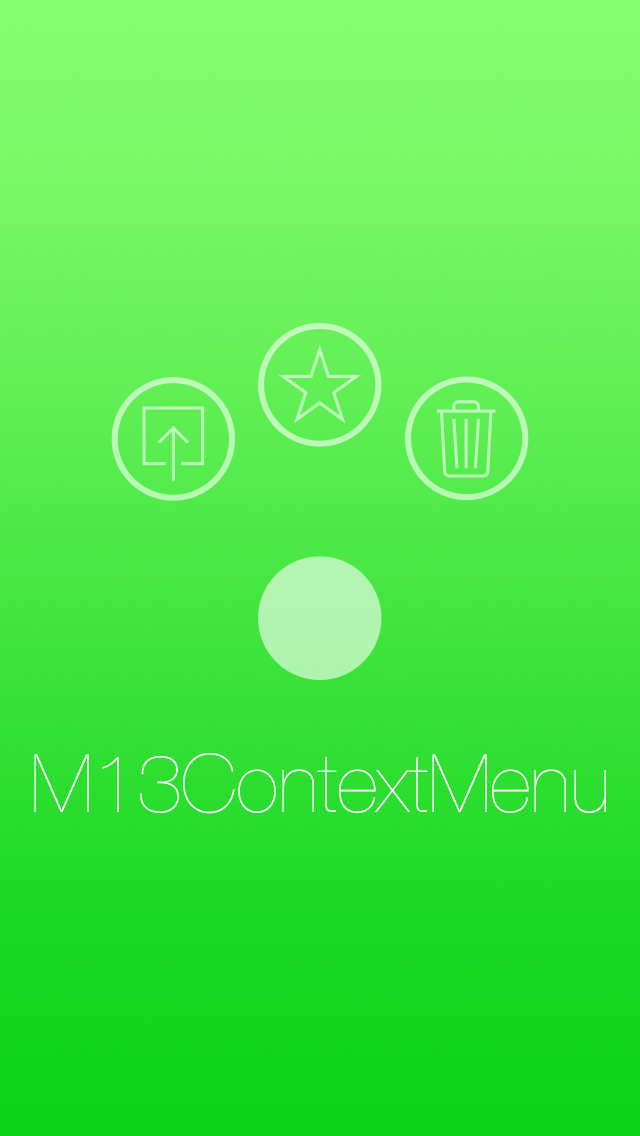
<style>
.page{position:relative;width:640px;height:1136px}
.page>*{position:absolute;margin:0}
.t1{font:81.1px "HelveticaNeue-UltraLight";letter-spacing:-0.007em;color:#ffffff}
</style>
<div class="page">
<p class="t1" style="left:34px;top:753px;width:572px;height:61px">M13ContextMenu</p>
</div>
